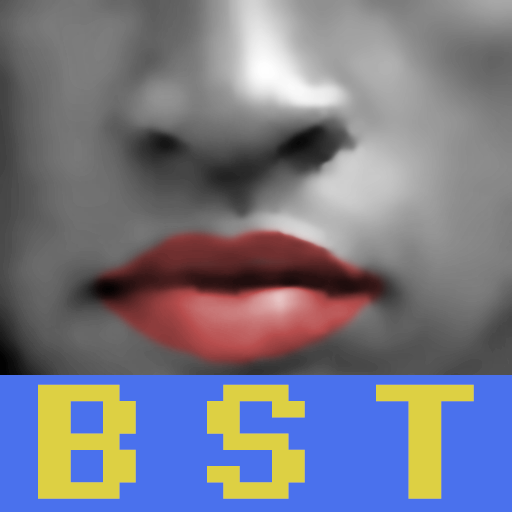
<style>
.page{position:relative;width:512px;height:512px}
.page>*{position:absolute;margin:0}
.t1{font:130px "C64ProMono";letter-spacing:0.3em;color:#ddd043}
</style>
<div class="page">
<p class="t1" style="left:38px;top:384px;width:436px;height:115px">BST</p>
</div>
